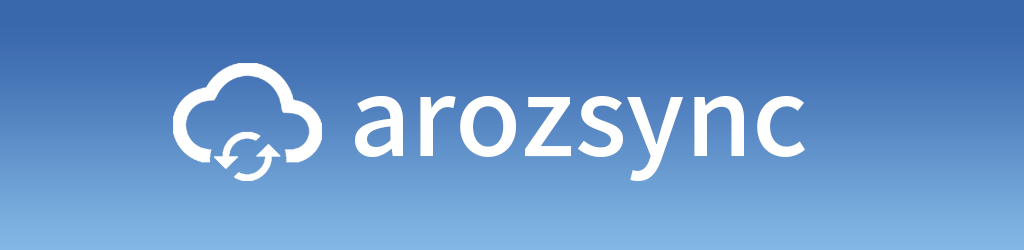
<style>
.page{position:relative;width:1024px;height:250px}
.page>*{position:absolute;margin:0}
.t1{font:108px "NotoSansCJKhk-Medium";color:#ffffff}
</style>
<div class="page">
<p class="t1" style="left:355px;top:95px;width:450px;height:86px">arozsync</p>
</div>
